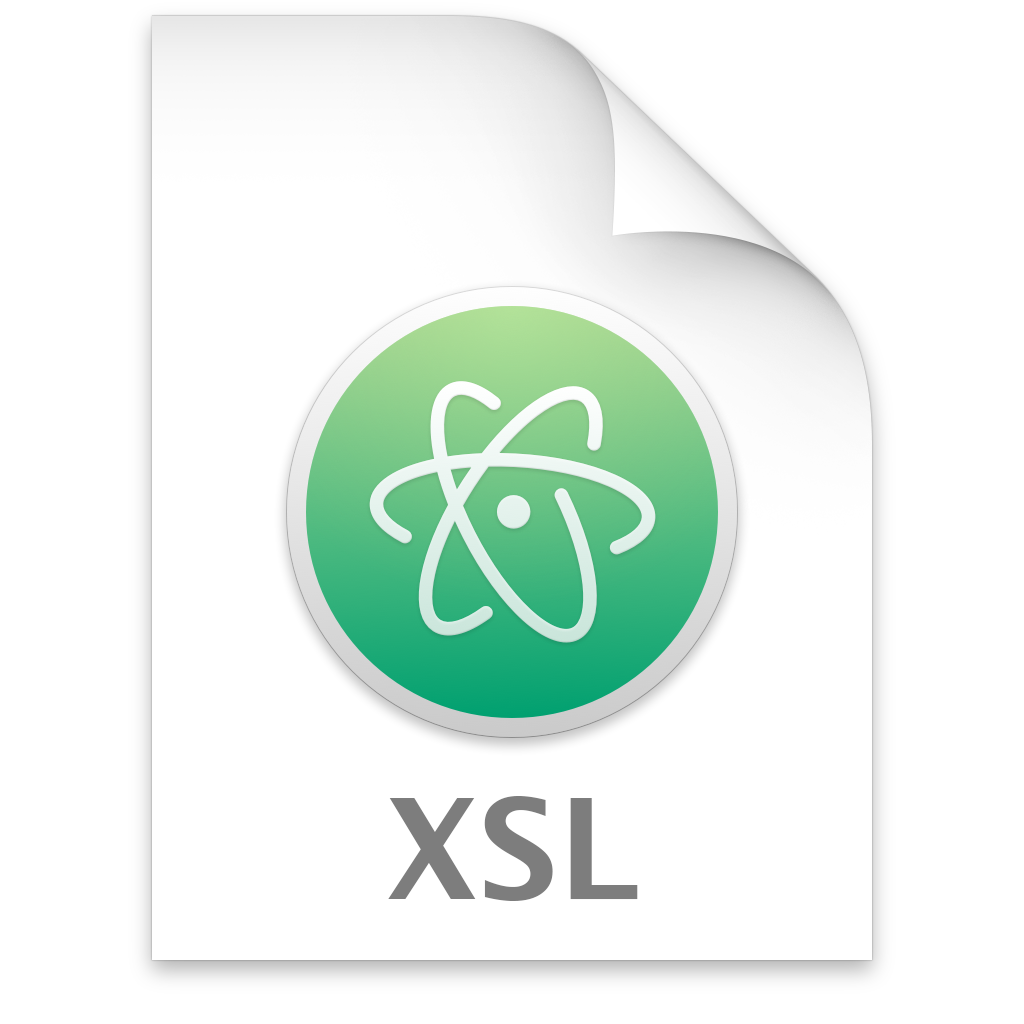
<style>
.page{position:relative;width:1024px;height:1024px;background:#ffffff}
.page>*{position:absolute;margin:0}
.t1{font:140px "LucidaGrande-Bold";color:#7d7d7d}
</style>
<div class="page">
<p class="t1" style="left:388px;top:796px;width:250px;height:105px">XSL</p>
</div>
